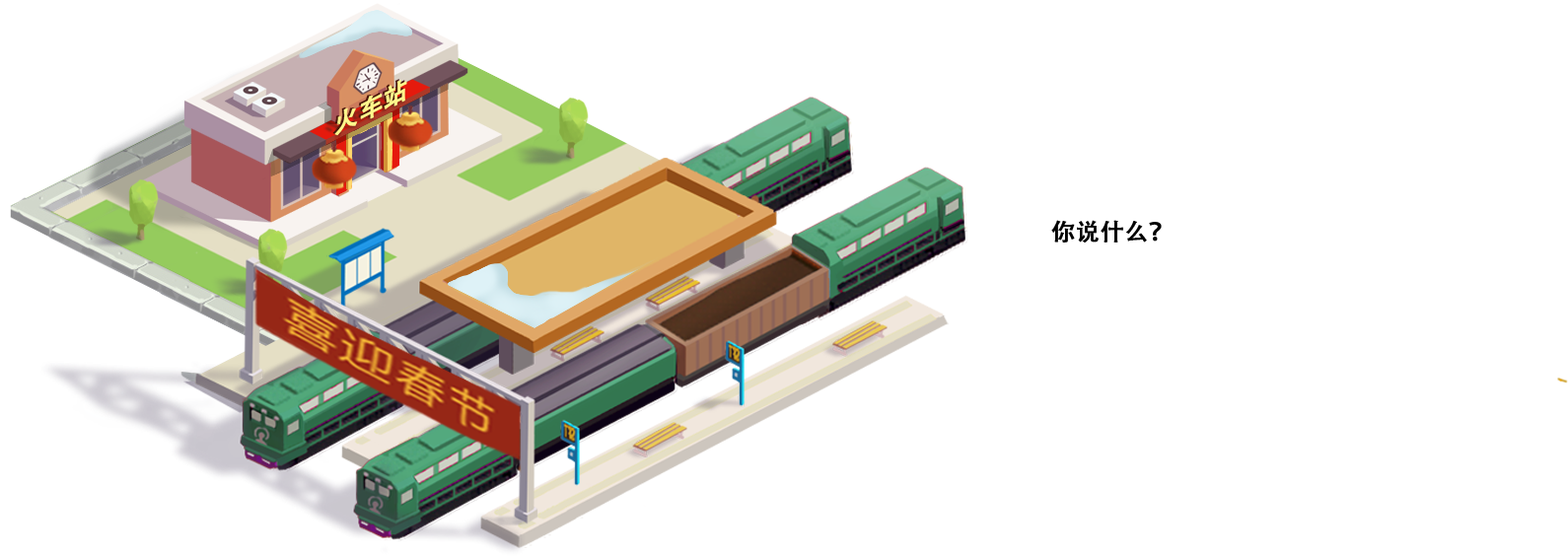
<style>
.page{position:relative;width:1568px;height:556px;background:#ffffff}
.page>*{position:absolute;margin:0}
.t1{font:24.2px "AdobeHeitiStd-Regular";color:#fff78c;text-transform:uppercase;font-weight:bold;scale:1.12 1}
.t2{font:23.7px "AdobeHeitiStd-Regular";color:#000000;text-transform:uppercase;font-weight:bold}
</style>
<div class="page">
<p class="t1" style="left:334px;top:80px;width:73px;height:56px;rotate:-27deg">火车站</p>
<p class="t2" style="left:1051px;top:220px;width:111px;height:23px">你说什么？</p>
</div>
